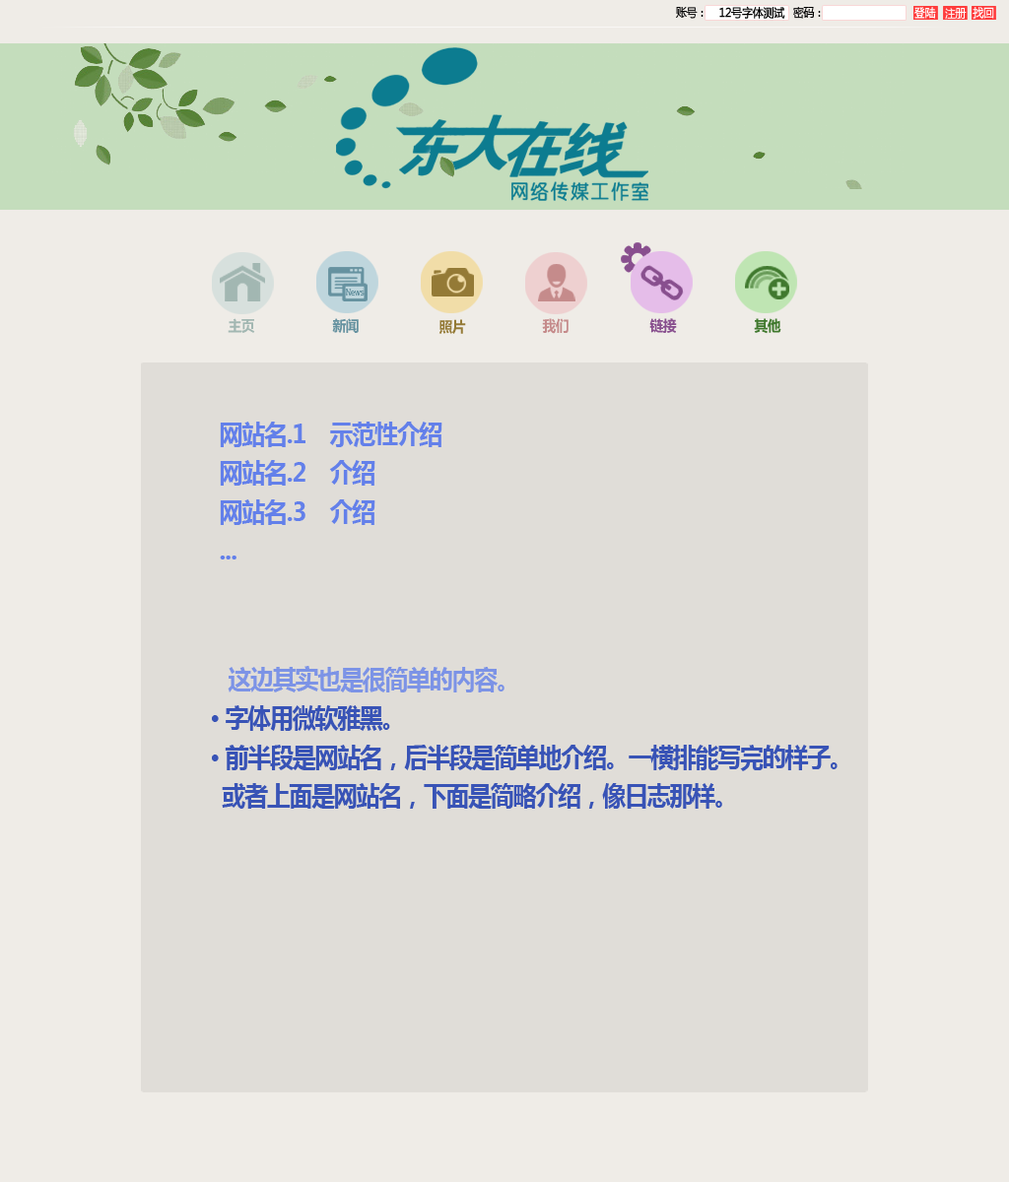
<style>
.page{position:relative;width:1009px;height:1182px;background:#e0ddd8}
.page>*{position:absolute;margin:0}
.t1{font:11.8px "MicrosoftYaHei";letter-spacing:-0.04em;color:#000000;font-weight:bold;scale:0.91 1}
.t2{font:11.8px "MicrosoftYaHei";letter-spacing:-0.04em;color:#000000;scale:0.91 1}
.t3{font:14.8px "MicrosoftYaHei-Bold";letter-spacing:-0.04em;color:#a2b7b2;scale:0.91 1}
.t4{font:14.8px "MicrosoftYaHei-Bold";letter-spacing:-0.04em;color:#6692a0;scale:0.91 1}
.t5{font:14.8px "MicrosoftYaHei-Bold";letter-spacing:-0.04em;color:#947a36;scale:0.91 1}
.t6{font:14.8px "MicrosoftYaHei-Bold";letter-spacing:-0.04em;color:#c58b8b;scale:0.91 1}
.t7{font:14.8px "MicrosoftYaHei-Bold";letter-spacing:-0.04em;color:#884f8e;scale:0.91 1}
.t8{font:14.8px "MicrosoftYaHei-Bold";letter-spacing:-0.04em;color:#40792e;scale:0.91 1}
.t9{font:25.6px/38.8px "MicrosoftYaHei-Bold";letter-spacing:-0.04em;color:#6380ea;scale:0.91 1}
.t10{font:25.6px/38.8px "MicrosoftYaHei-Bold";letter-spacing:-0.04em;color:#3853b6;scale:0.91 1}
.t11{font:25.6px/38.8px "MicrosoftYaHei-Bold";letter-spacing:-0.04em;color:#7c93e6;scale:0.91 1}
</style>
<div class="page">
<p class="t1" style="left:719px;top:6px;width:66px;height:13px">12号字体测试</p>
<p class="t2" style="left:676px;top:7px;width:27px;height:12px">账号：</p>
<p class="t2" style="left:793px;top:7px;width:28px;height:12px">密码：</p>
<p class="t3" style="left:228px;top:318px;width:27px;height:15px">主页</p>
<p class="t4" style="left:332px;top:318px;width:27px;height:15px">新闻</p>
<p class="t5" style="left:438px;top:319px;width:28px;height:15px">照片</p>
<p class="t6" style="left:542px;top:318px;width:26px;height:16px">我们</p>
<p class="t7" style="left:649px;top:318px;width:28px;height:15px">链接</p>
<p class="t8" style="left:754px;top:318px;width:27px;height:16px">其他</p>
<p class="t9" style="left:220px;top:422px;width:222px;height:138px">网站名.1    示范性介绍<br>网站名.2    介绍<br>网站名.3    介绍<br>...</p>
<p class="t10" style="left:212px;top:666px;width:625px;height:143px"><span class="t11">   这边其实也是很简单的内容。<br></span>· 字体用微软雅黑。<br>· 前半段是网站名，后半段是简单地介绍。一横排能写完的样子。<br>  或者上面是网站名，下面是简略介绍，像日志那样。</p>
</div>
